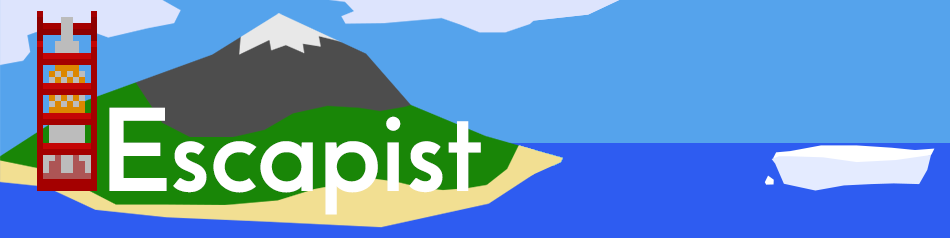
<style>
.page{position:relative;width:950px;height:238px;background:#55a3ec}
.page>*{position:absolute;margin:0}
.t1{font:114px "JosefinSans-Bold";color:#ffffff}
</style>
<div class="page">
<p class="t1" style="left:109px;top:107px;width:372px;height:108px">Escapist</p>
</div>
